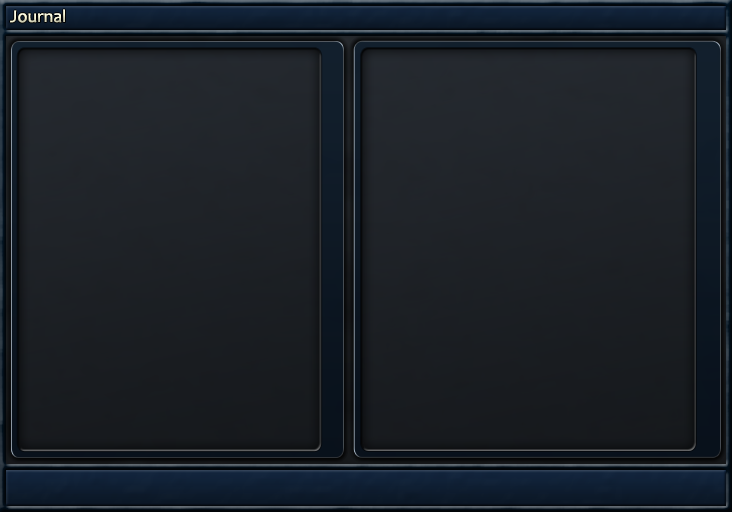
<style>
.page{position:relative;width:732px;height:512px}
.page>*{position:absolute;margin:0}
.t1{font:18px "Candara";color:#fefcdd}
</style>
<div class="page">
<p class="t1" style="left:10px;top:9px;width:55px;height:14px">Journal</p>
</div>
